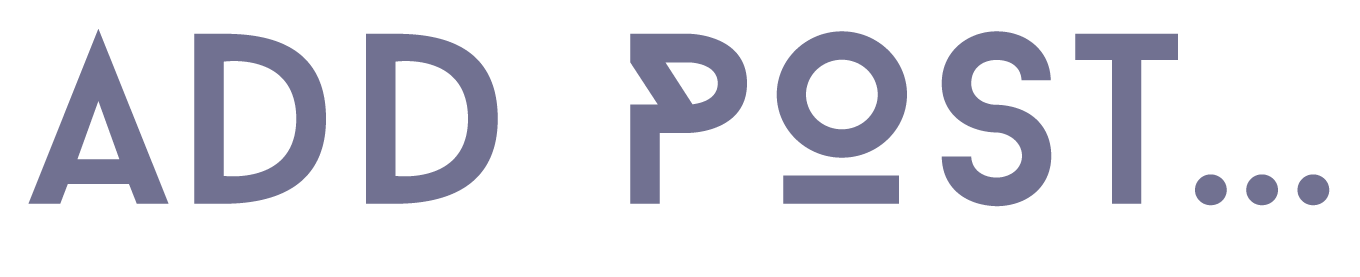
<style>
.page{position:relative;width:1360px;height:277px;background:#ffffff}
.page>*{position:absolute;margin:0}
.t1{font:242.5px "BaronNeue";letter-spacing:0.025em;color:#717191;scale:1.03 1}
</style>
<div class="page">
<p class="t1" style="left:28px;top:29px;width:1302px;height:178px">ADD POST...</p>
</div>
